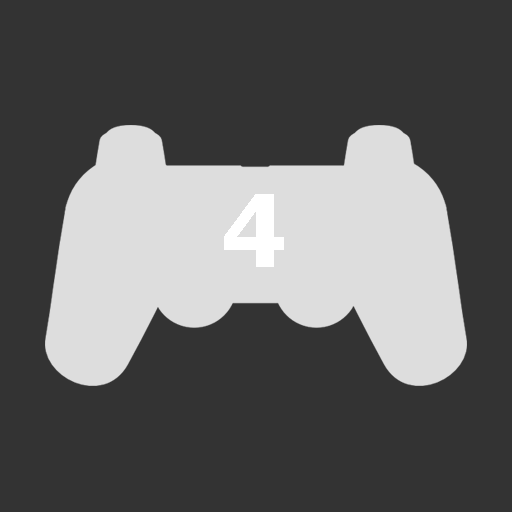
<style>
.page{position:relative;width:512px;height:512px;background:#333333}
.page>*{position:absolute;margin:0}
.t1{font:100px "Tahoma-Bold";color:#ffffff}
</style>
<div class="page">
<p class="t1" style="left:224px;top:194px;width:60px;height:73px">4</p>
</div>
